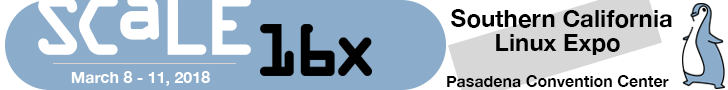
<style>
.page{position:relative;width:728px;height:90px;background:#8bacca}
.page>*{position:absolute;margin:0}
.t1{font:24px "HelveticaNeue-Bold";color:#000000}
.t2{font:16px "HelveticaNeue-Bold";color:#ffffff}
.t3{font:16px "HelveticaNeue-Bold";color:#000000}
</style>
<div class="page">
<p class="t1" style="left:451px;top:9px;width:221px;height:19px">Southern California</p>
<p class="t1" style="left:496px;top:34px;width:124px;height:21px">Linux Expo</p>
<p class="t2" style="left:71px;top:71px;width:139px;height:15px">March 8 - 11, 2018</p>
<p class="t3" style="left:447px;top:75px;width:222px;height:13px">Pasadena Convention Center</p>
</div>
